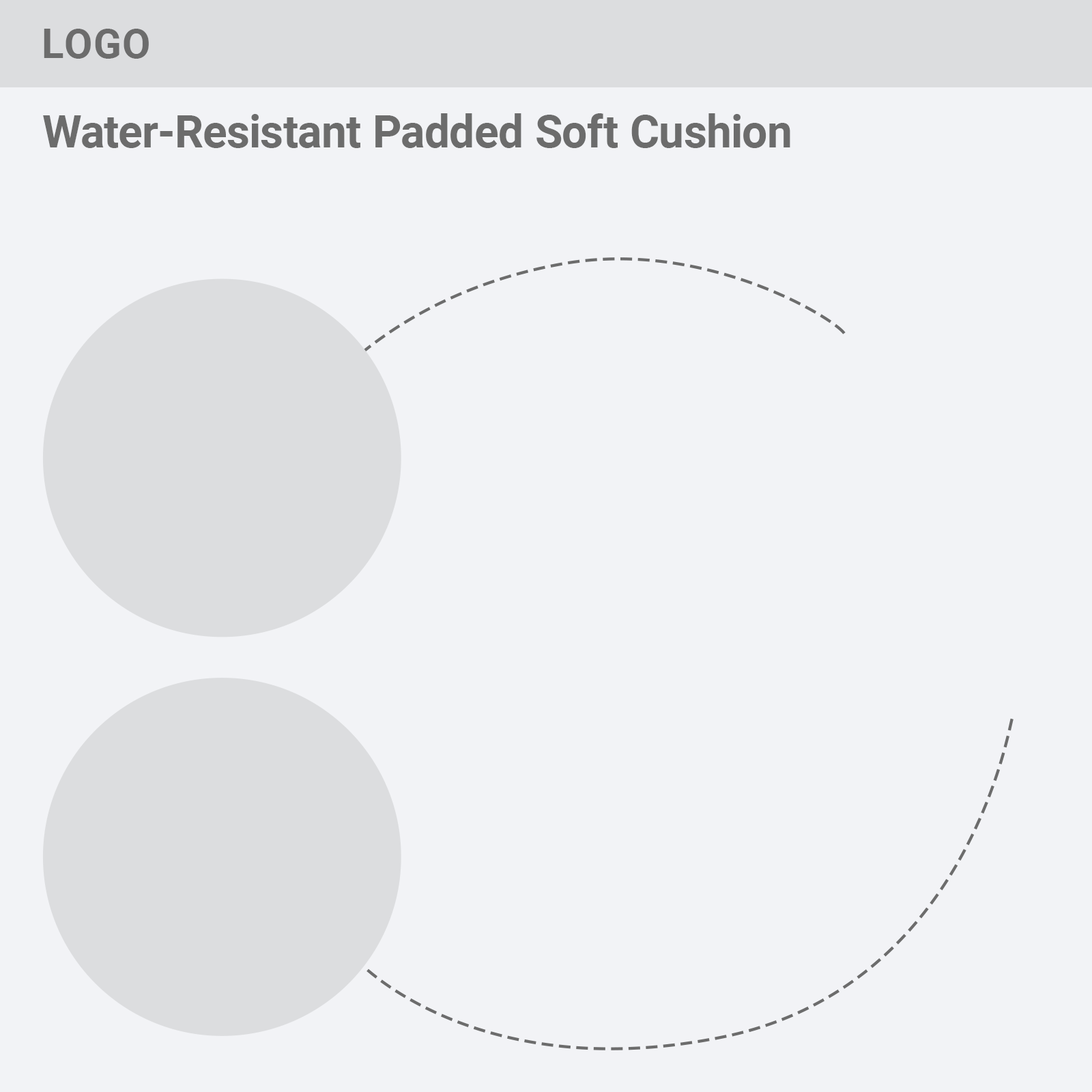
<style>
.page{position:relative;width:1092px;height:1092px;background:#f2f3f6}
.page>*{position:absolute;margin:0}
.t1{font:40.8px "Roboto-Bold";color:#6c6c6c;text-transform:uppercase}
.t2{font:45.1px "Roboto-Bold";color:#6c6c6c}
</style>
<div class="page">
<p class="t1" style="left:44px;top:29px;width:105px;height:30px">logo</p>
<p class="t2" style="left:43px;top:113px;width:747px;height:35px">Water-Resistant Padded Soft Cushion</p>
</div>
